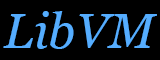
<style>
.page{position:relative;width:160px;height:60px;background:#000000}
.page>*{position:absolute;margin:0}
.t1{font:49.3px "Georgia-Italic";color:#55adff}
</style>
<div class="page">
<p class="t1" style="left:3px;top:11px;width:154px;height:38px">LibVM</p>
</div>
